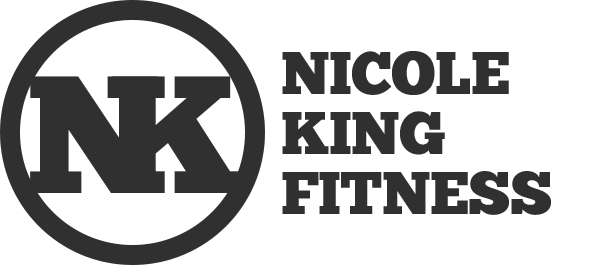
<style>
.page{position:relative;width:600px;height:265px;background:#ffffff}
.page>*{position:absolute;margin:0}
.t1{font:60px/60px "ChunkFive-Roman";letter-spacing:-0.015em;color:#303030}
</style>
<div class="page">
<p class="t1" style="left:282px;top:51px;width:269px;height:164px">NICOLE<br>KING <br>FITNESS</p>
</div>
